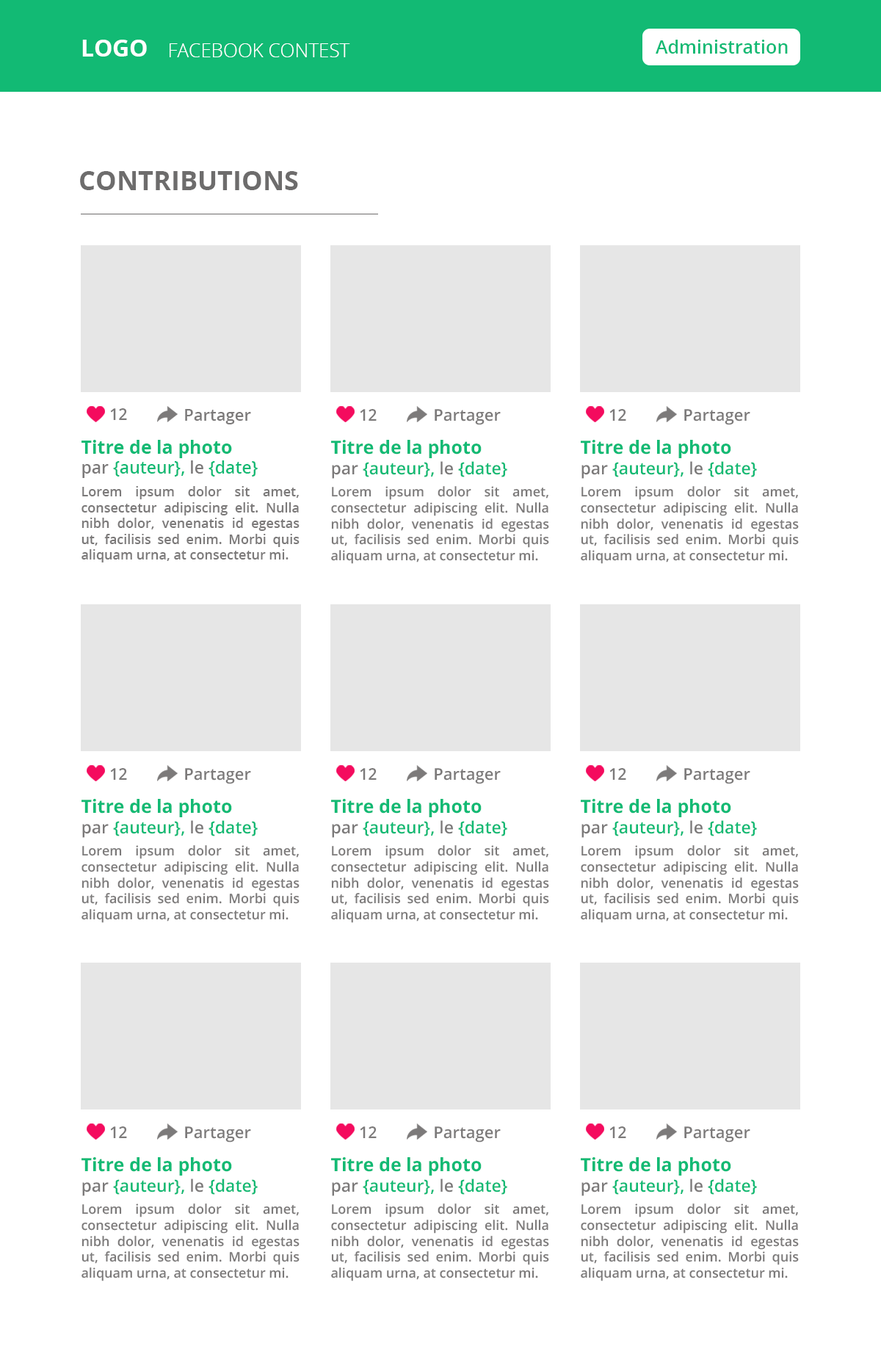
<style>
.page{position:relative;width:881px;height:1354px;background:#ffffff}
.page>*{position:absolute;margin:0}
.t1{font:23.5px "OpenSans-Bold";color:#ffffff}
.t2{font:18.4px "OpenSans-Semibold";color:#12ba74}
.t3{font:19.1px "OpenSans-Light";color:#ffffff;text-transform:uppercase}
.t4{font:26.4px "OpenSans-Bold";color:#6d6c6c;text-transform:uppercase}
.t5{font:16.1px "OpenSans-Semibold";color:#7c7a7a}
.t6{font:16.2px "OpenSans-Semibold";color:#7c7a7a}
.t7{font:13.2px "OpenSans-Semibold";color:#7c7a7a}
.t8{font:18.4px "OpenSans-Bold";color:#12ba74}
.t9{font:16.9px "OpenSans-Semibold";color:#7c7a7a}
.t10{font:16.9px "OpenSans-Semibold";color:#12ba74}
</style>
<div class="page">
<p class="t1" style="left:82px;top:40px;width:65px;height:17px">LOGO</p>
<p class="t2" style="left:656px;top:40px;width:132px;height:14px">Administration</p>
<p class="t3" style="left:170px;top:43px;width:180px;height:14px">Facebook contest</p>
<p class="t4" style="left:80px;top:171px;width:218px;height:19px">Contributions</p>
<p class="t5" style="left:110px;top:408px;width:17px;height:12px">12</p>
<p class="t5" style="left:185px;top:409px;width:66px;height:15px">Partager</p>
<p class="t6" style="left:360px;top:409px;width:17px;height:12px">12</p>
<p class="t6" style="left:435px;top:409px;width:66px;height:16px">Partager</p>
<p class="t6" style="left:609px;top:409px;width:17px;height:12px">12</p>
<p class="t6" style="left:684px;top:409px;width:66px;height:16px">Partager</p>
<p class="t7" style="left:81px;top:440px;width:219px;height:122px"><span class="t8">Titre de la photo<br></span><span class="t9">par</span><span class="t10"> {auteur}, </span><span class="t9">le</span><span class="t10"> {date}<br><br></span>Lorem ipsum dolor sit amet, consectetur adipiscing elit. Nulla nibh dolor, venenatis id egestas ut, facilisis sed enim. Morbi quis aliquam urna, at consectetur mi.</p>
<p class="t7" style="left:331px;top:440px;width:218px;height:124px"><span class="t8">Titre de la photo<br></span><span class="t9">par</span><span class="t10"> {auteur}, </span><span class="t9">le</span><span class="t10"> {date}<br><br></span>Lorem ipsum dolor sit amet, consectetur adipiscing elit. Nulla nibh dolor, venenatis id egestas ut, facilisis sed enim. Morbi quis aliquam urna, at consectetur mi.</p>
<p class="t7" style="left:581px;top:440px;width:218px;height:124px"><span class="t8">Titre de la photo<br></span><span class="t9">par</span><span class="t10"> {auteur}, </span><span class="t9">le</span><span class="t10"> {date}<br><br></span>Lorem ipsum dolor sit amet, consectetur adipiscing elit. Nulla nibh dolor, venenatis id egestas ut, facilisis sed enim. Morbi quis aliquam urna, at consectetur mi.</p>
<p class="t6" style="left:110px;top:768px;width:17px;height:12px">12</p>
<p class="t6" style="left:185px;top:768px;width:66px;height:16px">Partager</p>
<p class="t6" style="left:360px;top:768px;width:17px;height:12px">12</p>
<p class="t6" style="left:435px;top:768px;width:66px;height:16px">Partager</p>
<p class="t6" style="left:609px;top:768px;width:17px;height:12px">12</p>
<p class="t6" style="left:684px;top:768px;width:66px;height:16px">Partager</p>
<p class="t7" style="left:81px;top:799px;width:219px;height:124px"><span class="t8">Titre de la photo<br></span><span class="t9">par</span><span class="t10"> {auteur}, </span><span class="t9">le</span><span class="t10"> {date}<br><br></span>Lorem ipsum dolor sit amet, consectetur adipiscing elit. Nulla nibh dolor, venenatis id egestas ut, facilisis sed enim. Morbi quis aliquam urna, at consectetur mi.</p>
<p class="t7" style="left:331px;top:799px;width:218px;height:124px"><span class="t8">Titre de la photo<br></span><span class="t9">par</span><span class="t10"> {auteur}, </span><span class="t9">le</span><span class="t10"> {date}<br><br></span>Lorem ipsum dolor sit amet, consectetur adipiscing elit. Nulla nibh dolor, venenatis id egestas ut, facilisis sed enim. Morbi quis aliquam urna, at consectetur mi.</p>
<p class="t7" style="left:581px;top:799px;width:218px;height:124px"><span class="t8">Titre de la photo<br></span><span class="t9">par</span><span class="t10"> {auteur}, </span><span class="t9">le</span><span class="t10"> {date}<br><br></span>Lorem ipsum dolor sit amet, consectetur adipiscing elit. Nulla nibh dolor, venenatis id egestas ut, facilisis sed enim. Morbi quis aliquam urna, at consectetur mi.</p>
<p class="t6" style="left:110px;top:1126px;width:17px;height:12px">12</p>
<p class="t6" style="left:185px;top:1126px;width:66px;height:16px">Partager</p>
<p class="t6" style="left:360px;top:1126px;width:17px;height:12px">12</p>
<p class="t6" style="left:435px;top:1126px;width:66px;height:16px">Partager</p>
<p class="t6" style="left:609px;top:1126px;width:17px;height:12px">12</p>
<p class="t6" style="left:684px;top:1126px;width:66px;height:16px">Partager</p>
<p class="t7" style="left:81px;top:1157px;width:219px;height:124px"><span class="t8">Titre de la photo<br></span><span class="t9">par</span><span class="t10"> {auteur}, </span><span class="t9">le</span><span class="t10"> {date}<br><br></span>Lorem ipsum dolor sit amet, consectetur adipiscing elit. Nulla nibh dolor, venenatis id egestas ut, facilisis sed enim. Morbi quis aliquam urna, at consectetur mi.</p>
<p class="t7" style="left:331px;top:1157px;width:218px;height:124px"><span class="t8">Titre de la photo<br></span><span class="t9">par</span><span class="t10"> {auteur}, </span><span class="t9">le</span><span class="t10"> {date}<br><br></span>Lorem ipsum dolor sit amet, consectetur adipiscing elit. Nulla nibh dolor, venenatis id egestas ut, facilisis sed enim. Morbi quis aliquam urna, at consectetur mi.</p>
<p class="t7" style="left:581px;top:1157px;width:218px;height:124px"><span class="t8">Titre de la photo<br></span><span class="t9">par</span><span class="t10"> {auteur}, </span><span class="t9">le</span><span class="t10"> {date}<br><br></span>Lorem ipsum dolor sit amet, consectetur adipiscing elit. Nulla nibh dolor, venenatis id egestas ut, facilisis sed enim. Morbi quis aliquam urna, at consectetur mi.</p>
</div>
